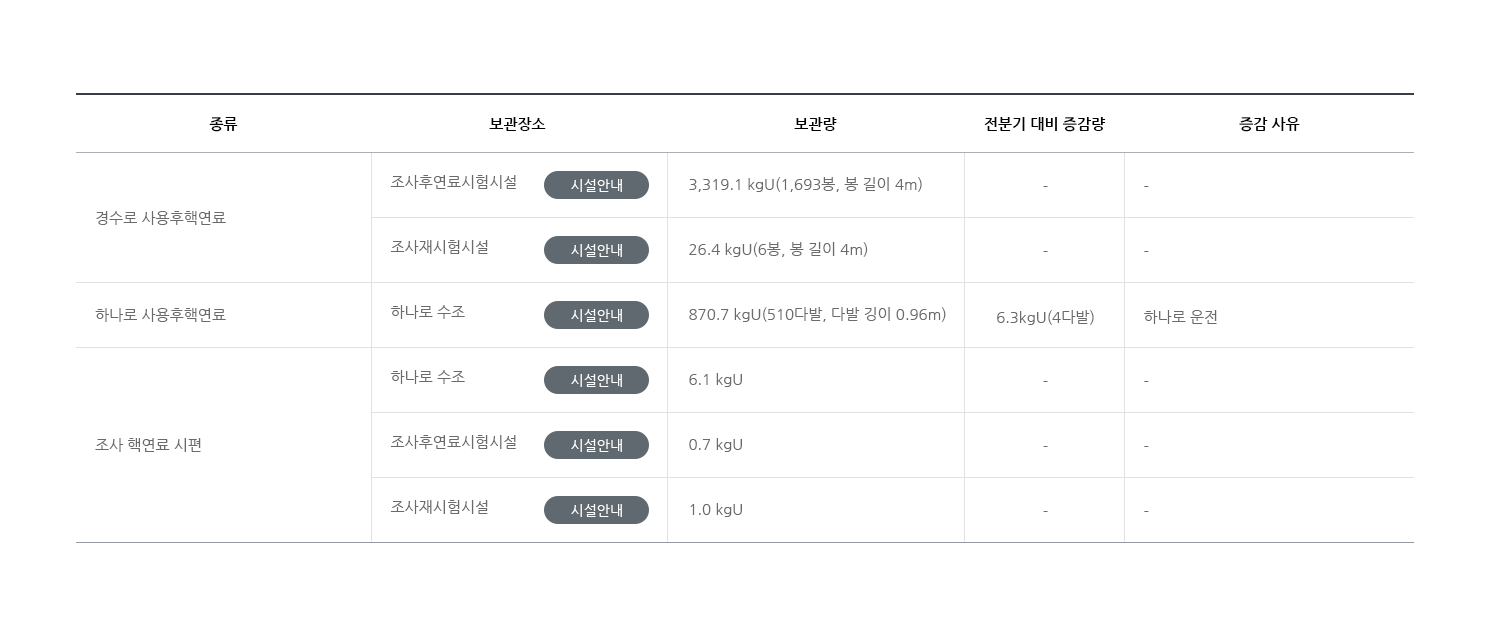
<style>
.page{position:relative;width:1500px;height:639px;background:#ffffff}
.page>*{position:absolute;margin:0}
.t1{font:15px "NanumGothicBold";color:#010101}
.t2{font:15px/65px "NanumGothic";color:#6a6a6a}
.t3{font:15px "NanumGothic";color:#6a6a6a}
</style>
<div class="page">
<p class="t1" style="left:209px;top:117px;width:29px;height:15px">종류</p>
<p class="t1" style="left:489px;top:117px;width:57px;height:14px">보관장소</p>
<p class="t1" style="left:794px;top:117px;width:43px;height:14px">보관량</p>
<p class="t1" style="left:984px;top:117px;width:122px;height:15px">전분기 대비 증감량</p>
<p class="t1" style="left:1239px;top:117px;width:61px;height:15px">증감 사유</p>
<p class="t2" style="left:390px;top:175px;width:126px;height:339px">조사후연료시험시설<br>조사재시험시설<br>하나로 수조<br>하나로 수조<br>조사후연료시험시설<br>조사재시험시설</p>
<p class="t2" style="left:689px;top:177px;width:257px;height:340px">3,319.1 kgU(1,693봉, 봉 길이 4m)<br>26.4 kgU(6봉, 봉 길이 4m)<br>870.7 kgU(510다발, 다발 깅이 0.96m)<br>6.1 kgU<br>0.7 kgU<br>1.0 kgU</p>
<p class="t2" style="left:997px;top:186px;width:97px;height:326px;text-align:center">-<br>-<br>6.3kgU(4다발)<br>-<br>-<br>-</p>
<p class="t2" style="left:1144px;top:186px;width:73px;height:326px">-<br>-<br>하나로 운전<br>-<br>-<br>-</p>
<p class="t3" style="left:96px;top:211px;width:130px;height:14px">경수로 사용후핵연료</p>
<p class="t3" style="left:95px;top:308px;width:131px;height:14px">하나로 사용후핵연료</p>
<p class="t3" style="left:95px;top:438px;width:106px;height:14px">조사 핵연료 시편</p>
</div>
